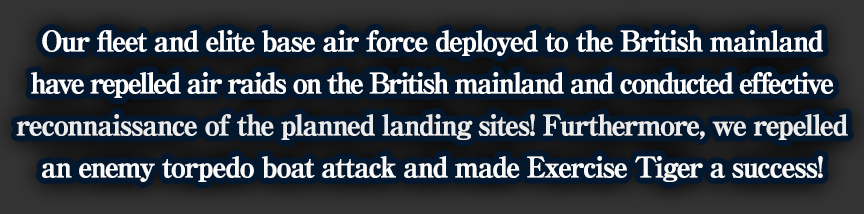
<style>
.page{position:relative;width:864px;height:214px;background:#03172f}
.page>*{position:absolute;margin:0}
.t1{font:28px/42px "RyuminPro-ExBold";letter-spacing:-0.08em;color:#ffffff;font-weight:bold}
.t2{font:28px/42px "RyuminPro-ExBold";letter-spacing:-0.1em;color:#ffffff;font-weight:bold}
</style>
<div class="page">
<p class="t1" style="left:16px;top:30px;width:832px;height:152px;text-align:center">Our fleet and elite base air force deployed to the British mainland<br><span class="t2">have repelled air raids on the British mainland and conducted effective<br></span>reconnaissance of the planned landing sites! Furthermore, we repelled<br>an enemy torpedo boat attack and made Exercise Tiger a success!</p>
</div>
